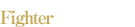
<style>
.page{position:relative;width:135px;height:27px;background:#ffffff}
.page>*{position:absolute;margin:0}
.t1{font:18px "RyuminPro-ExBold";letter-spacing:-0.08em;color:#c4a956}
</style>
<div class="page">
<p class="t1" style="left:0px;top:10px;width:54px;height:17px">Fighter</p>
</div>
